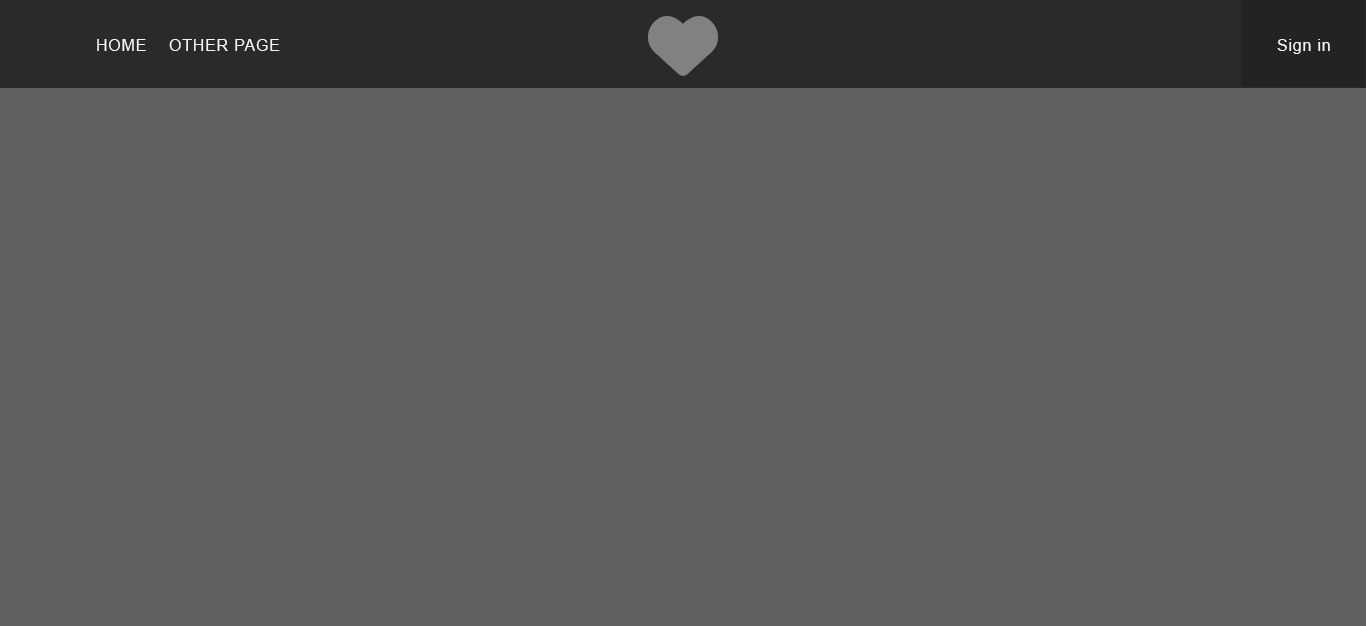
<style>
.page{position:relative;width:1366px;height:626px;background:#606060}
.page>*{position:absolute;margin:0}
.t1{font:16px "ArialMT";letter-spacing:0.05em;color:#f5f5f5;text-transform:uppercase}
.t2{font:16px "ArialMT";letter-spacing:0.05em;color:#f5f5f5}
</style>
<div class="page">
<p class="t1" style="left:97px;top:39px;width:49px;height:12px">Home</p>
<p class="t1" style="left:169px;top:39px;width:111px;height:12px">other page</p>
<p class="t2" style="left:1277px;top:39px;width:53px;height:15px">Sign in</p>
</div>
